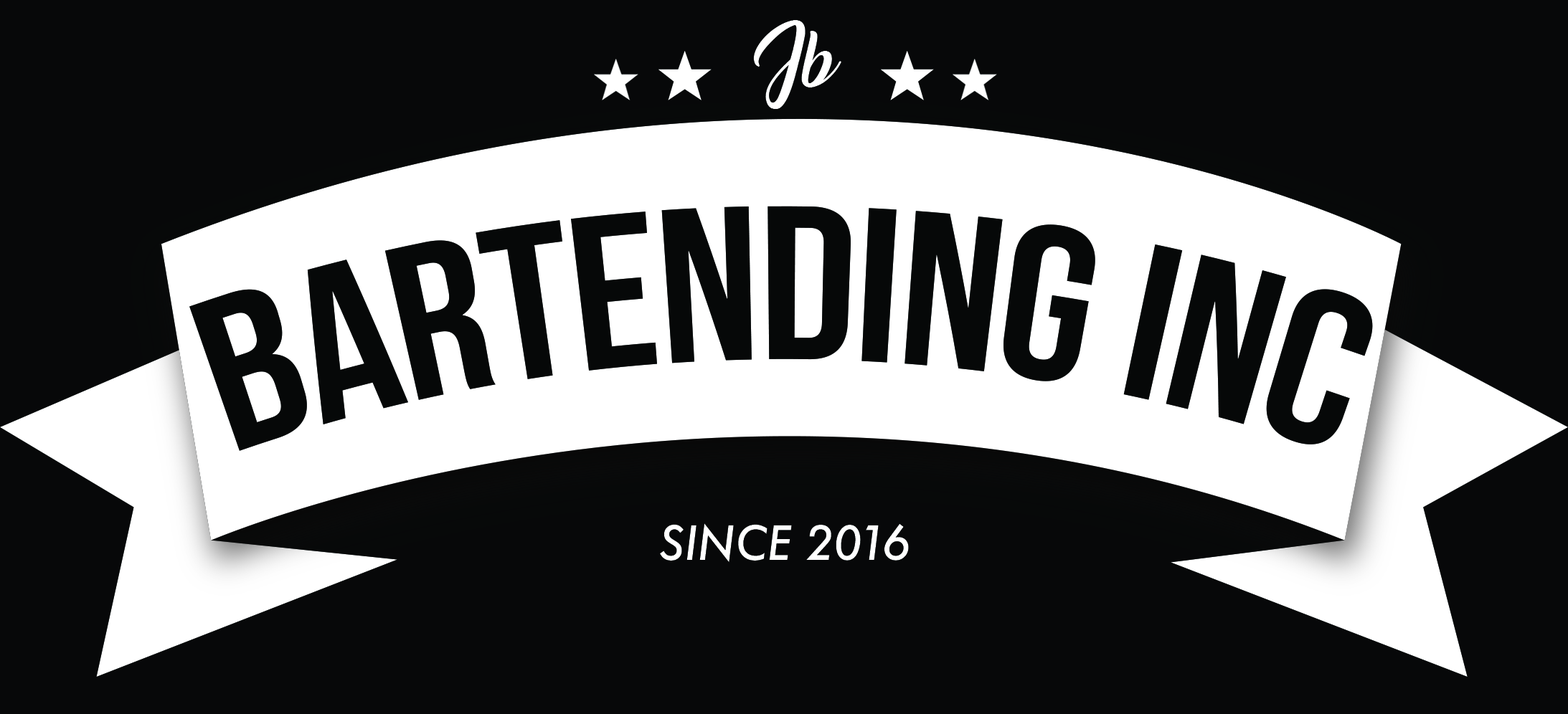
<style>
.page{position:relative;width:1568px;height:714px;background:#070809}
.page>*{position:absolute;margin:0}
.t1{font:48.8px/82.9px "Amarillo";color:#ffffff}
.t2{font:218.5px "BebasNeue";color:#060808}
.t3{font:45.8px "Futura-MediumItalic";color:#ffffff}
</style>
<div class="page">
<p class="t1" style="left:753px;top:20px;width:88px;height:89px">Jb</p>
<p class="t2" style="left:189px;top:206px;width:1184px;height:245px">BARTENDING INC</p>
<p class="t3" style="left:660px;top:524px;width:249px;height:39px">SINCE 2016</p>
</div>
